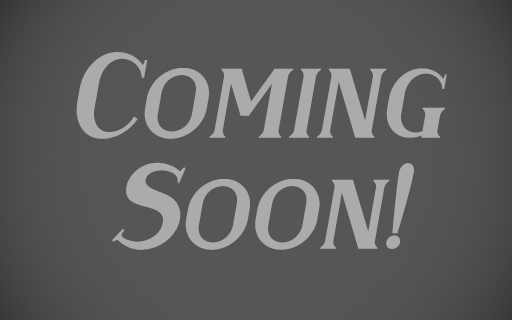
<style>
.page{position:relative;width:512px;height:320px;background:#565656}
.page>*{position:absolute;margin:0}
.t1{font:124.9px/111px "OudWarenhuis";letter-spacing:0.005em;color:#ababab;font-style:italic}
</style>
<div class="page">
<p class="t1" style="left:76px;top:52px;width:371px;height:198px;text-align:center">Coming<br>Soon!</p>
</div>
